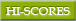
<style>
.page{position:relative;width:76px;height:21px;background:#8daf07}
.page>*{position:absolute;margin:0}
.t1{font:12px "BookAntiqua";color:#ffffff}
</style>
<div class="page">
<p class="t1" style="left:6px;top:7px;width:64px;height:8px">HI-SCORES</p>
</div>
